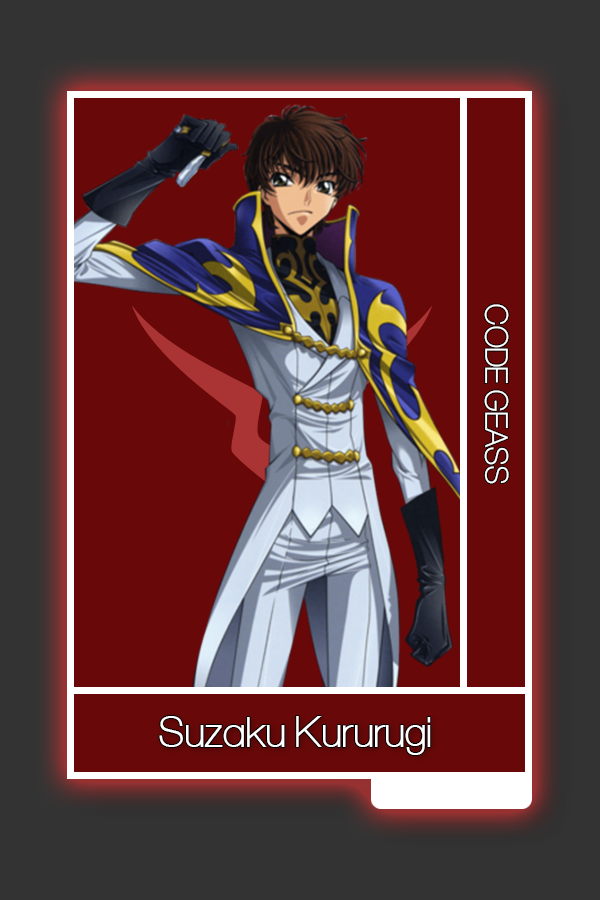
<style>
.page{position:relative;width:600px;height:900px;background:#680808}
.page>*{position:absolute;margin:0}
.t1{font:31.2px "Aliquam";color:#ffffff}
.t2{font:43.2px "Aliquam";color:#ffffff}
</style>
<div class="page">
<p class="t1" style="left:484px;top:304px;width:25px;height:180px;rotate:90deg">CODE GEASS</p>
<p class="t2" style="left:159px;top:716px;width:272px;height:39px">Suzaku Kururugi</p>
</div>
